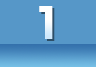
<style>
.page{position:relative;width:96px;height:67px;background:#5697c8}
.page>*{position:absolute;margin:0}
.t1{font:40px "GmarketSansTTFBold";letter-spacing:-0.075em;color:#ffffff}
</style>
<div class="page">
<p class="t1" style="left:39px;top:6px;width:14px;height:33px">1</p>
</div>
